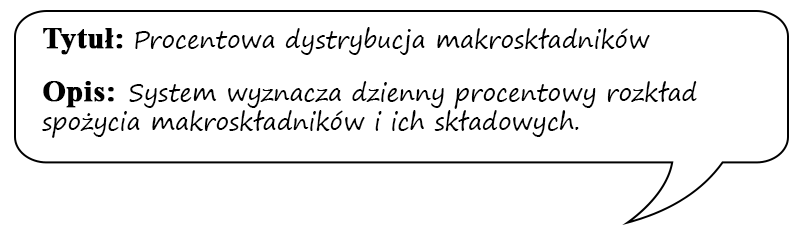
<style>
.page{position:relative;width:800px;height:236px;background:#ffffff}
.page>*{position:absolute;margin:0}
.t1{font:24px "SegoePrint";color:#000000}
.t2{font:30px "TimesNewRomanPS-BoldMT";color:#000000;font-weight:bold}
</style>
<div class="page">
<p class="t1" style="left:42px;top:27px;width:655px;height:111px"><span class="t2">Tytuł: </span>Procentowa dystrybucja makroskładników<br><br><span class="t2">Opis:  </span>System wyznacza dzienny procentowy rozkład spożycia makroskładników i ich składowych.</p>
</div>
